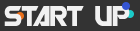
<style>
.page{position:relative;width:140px;height:31px;background:#333333}
.page>*{position:absolute;margin:0}
.t1{font:25px "ROBO";letter-spacing:-0.04em;color:#f1f1f1}
</style>
<div class="page">
<p class="t1" style="left:4px;top:6px;width:126px;height:20px">start up</p>
</div>
